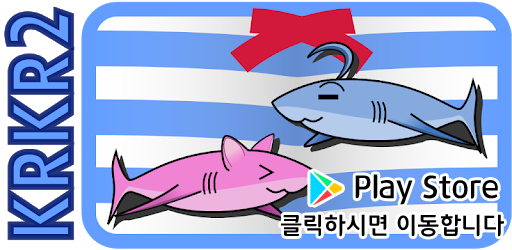
<style>
.page{position:relative;width:512px;height:250px}
.page>*{position:absolute;margin:0}
.t1{font:32px "12LotteMartDreamBold";color:#000000}
.t2{font:24px "12LotteMartDreamBold";color:#000000}
</style>
<div class="page">
<p class="t1" style="left:355px;top:174px;width:143px;height:31px">Play Store</p>
<p class="t2" style="left:281px;top:214px;width:223px;height:23px">클릭하시면 이동합니다</p>
</div>
